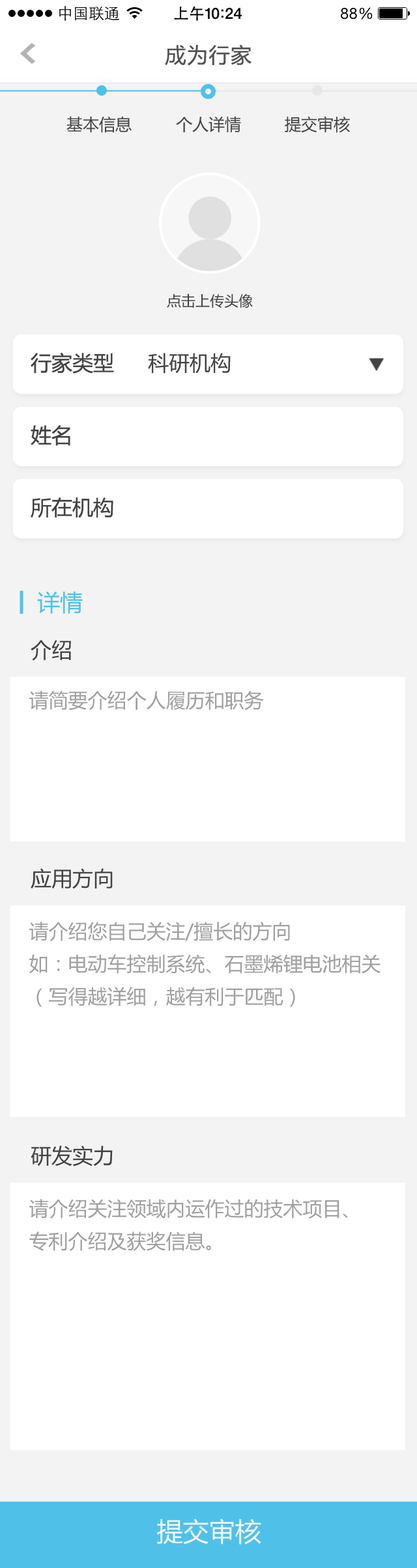
<style>
.page{position:relative;width:417px;height:1568px;background:#ffffff}
.page>*{position:absolute;margin:0}
.t1{font:20.8px "MicrosoftYaHei";letter-spacing:0.05em;color:#535353}
.t2{font:16.3px "MicrosoftYaHei";color:#434343}
.t3{font:14.3px "MicrosoftYaHei";color:#434343}
.t4{font:20.8px "MicrosoftYaHei";color:#434343}
.t5{font:22.8px "MicrosoftYaHei";color:#4fc1e9}
.t6{font:19.5px "MicrosoftYaHei";color:#a0a0a0}
.t7{font:19.5px/32.5px "MicrosoftYaHei";color:#a0a0a0}
.t8{font:26px "MicrosoftYaHei";color:#f4f4f4}
</style>
<div class="page">
<p class="t1" style="left:165px;top:44px;width:86px;height:22px">成为行家</p>
<p class="t2" style="left:66px;top:117px;width:65px;height:16px">基本信息</p>
<p class="t2" style="left:176px;top:117px;width:65px;height:16px">个人详情</p>
<p class="t2" style="left:284px;top:116px;width:66px;height:17px">提交审核</p>
<p class="t3" style="left:167px;top:294px;width:86px;height:14px">点击上传头像</p>
<p class="t4" style="left:31px;top:352px;width:83px;height:22px">行家类型</p>
<p class="t4" style="left:148px;top:353px;width:82px;height:21px">科研机构</p>
<p class="t4" style="left:31px;top:425px;width:39px;height:21px">姓名</p>
<p class="t4" style="left:31px;top:497px;width:82px;height:21px">所在机构</p>
<p class="t5" style="left:37px;top:591px;width:46px;height:23px">详情</p>
<p class="t4" style="left:31px;top:640px;width:40px;height:21px">介绍</p>
<p class="t6" style="left:29px;top:691px;width:235px;height:19px">请简要介绍个人履历和职务</p>
<p class="t4" style="left:31px;top:868px;width:82px;height:21px">应用方向</p>
<p class="t7" style="left:29px;top:922px;width:351px;height:85px">请介绍您自己关注/擅长的方向<br>如：电动车控制系统、石墨烯锂电池相关<br>（写得越详细，越有利于匹配）</p>
<p class="t4" style="left:31px;top:1146px;width:82px;height:20px">研发实力</p>
<p class="t7" style="left:29px;top:1199px;width:319px;height:52px">请介绍关注领域内运作过的技术项目、<br>专利介绍及获奖信息。</p>
<p class="t8" style="left:157px;top:1519px;width:104px;height:26px">提交审核</p>
</div>
